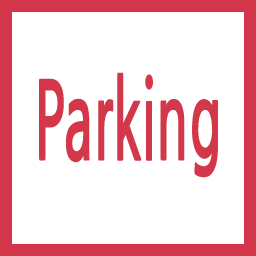
<style>
.page{position:relative;width:256px;height:256px;background:#ffffff}
.page>*{position:absolute;margin:0}
.t1{font:108px "NanumGothicBold";letter-spacing:0.01em;color:#d2374a;scale:0.5 1}
</style>
<div class="page">
<p class="t1" style="left:39px;top:72px;width:179px;height:106px">Parking</p>
</div>
